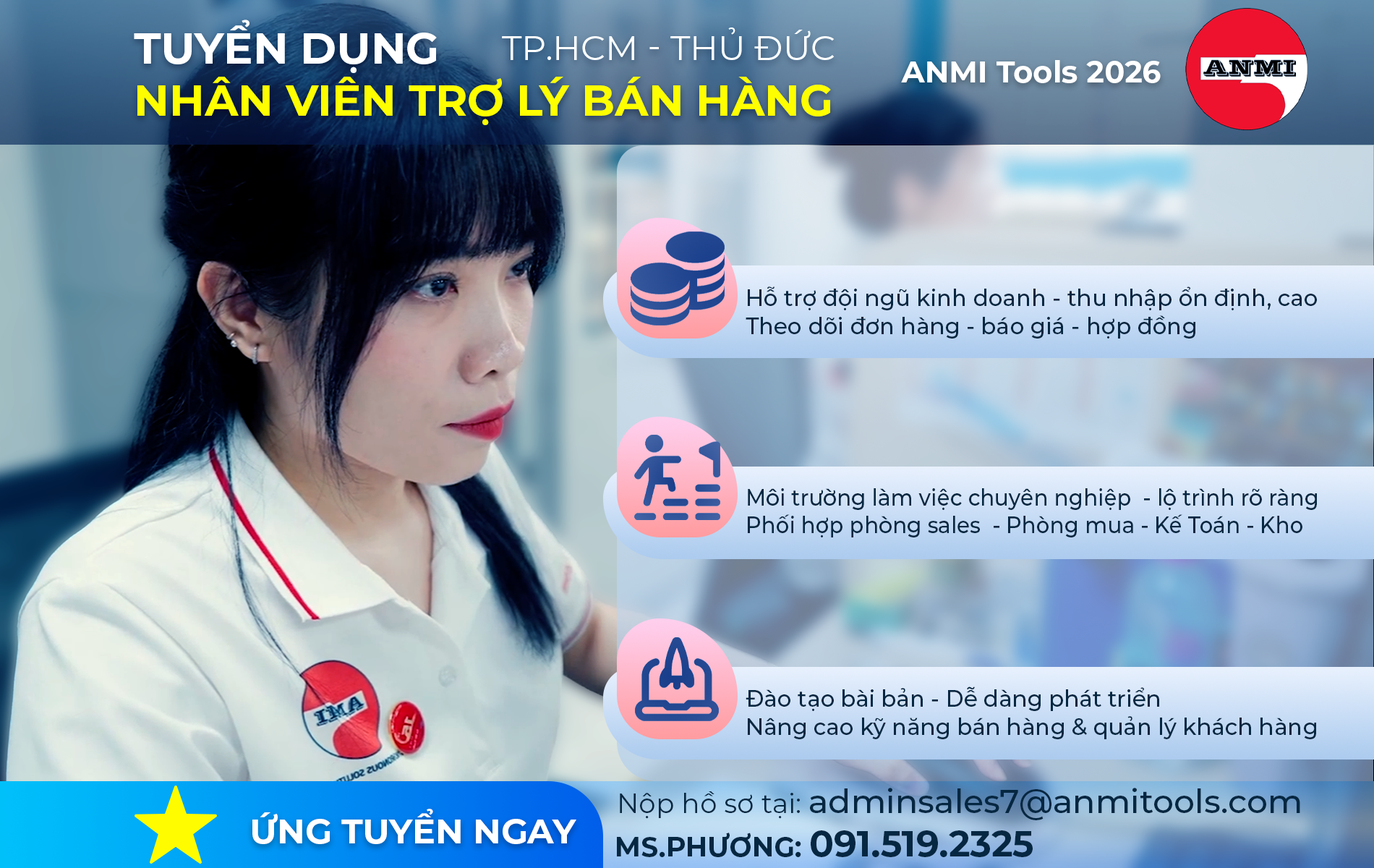
<style>
.page{position:relative;width:1374px;height:868px}
.page>*{position:absolute;margin:0}
.t1{font:43.6px "Montserrat-Bold";color:#fffc00;text-transform:uppercase}
.t2{font:43.6px "Montserrat-Bold";color:#ffffff;text-transform:uppercase}
.t3{font:34.5px "Montserrat-Regular";color:#ffffff;text-transform:uppercase}
.t4{font:30.1px "Montserrat-Bold";color:#ffffff}
.t5{font:23.1px "Montserrat-Medium";color:#062741}
.t6{font:23.1px "Montserrat-Medium";color:#062741;scale:0.93 1}
.t7{font:23.1px "Montserrat-Medium";color:#062741;scale:0.97 1}
.t8{font:33.1px "Montserrat-Medium";color:#062741}
.t9{font:27.1px "Montserrat-Regular";color:#062741}
.t10{font:34.5px "Montserrat-Bold";color:#ffffff;text-transform:uppercase}
.t11{font:36.2px "Montserrat-Bold";color:#062741}
.t12{font:27.1px "Montserrat-Bold";color:#062741}
</style>
<div class="page">
<p class="t1" style="left:134px;top:20px;width:697px;height:105px"><span class="t2">Tuyển dụng<br></span>Nhân viên trợ lý bán hàng</p>
<p class="t3" style="left:502px;top:27px;width:333px;height:33px">TP.HCM - Thủ đức</p>
<p class="t4" style="left:901px;top:60px;width:260px;height:23px">ANMI Tools 2026</p>
<p class="t5" style="left:746px;top:286px;width:571px;height:52px">Hỗ trợ đội ngũ kinh doanh - thu nhập ổn định, cao<br>Theo dõi đơn hàng - báo giá - hợp đồng</p>
<p class="t6" style="left:748px;top:488px;width:569px;height:49px">Môi trường làm việc chuyên nghiệp  - lộ trình rõ ràng <br>Phối hợp phòng sales  - Phòng mua - Kế Toán - Kho</p>
<p class="t7" style="left:746px;top:686px;width:570px;height:53px">Đào tạo bài bản - Dễ dàng phát triển<br>Nâng cao kỹ năng bán hàng &amp; quản lý khách hàng</p>
<p class="t8" style="left:620px;top:788px;width:680px;height:32px"><span class="t9">Nộp hồ sơ tại: </span>adminsales7@anmitools.com</p>
<p class="t10" style="left:252px;top:809px;width:324px;height:35px">Ứng tuyển ngay</p>
<p class="t11" style="left:617px;top:830px;width:416px;height:27px"><span class="t12">MS.PHƯƠNG: </span>091.519.2325</p>
</div>
